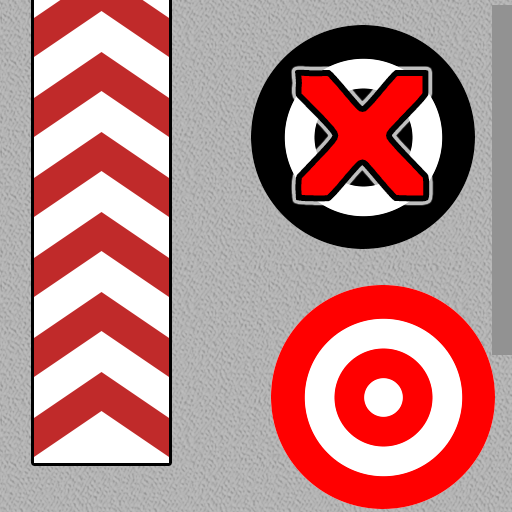
<style>
.page{position:relative;width:512px;height:512px}
.page>*{position:absolute;margin:0}
.t1{font:191px "BerlinSansFBDemi-Bold";color:#ff0000;scale:1.27 1}
</style>
<div class="page">
<p class="t1" style="left:295px;top:69px;width:135px;height:133px">X</p>
</div>
